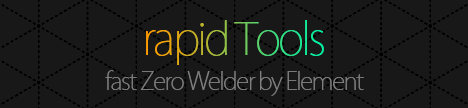
<style>
.page{position:relative;width:468px;height:108px;background:#181818}
.page>*{position:absolute;margin:0}
.t1{font:44.1px "KozGoPr6N-ExtraLight";letter-spacing:-0.06em}
.t2{font:24.1px "KozGoPr6N-ExtraLight";letter-spacing:-0.06em;color:#7f7f7f}
</style>
<div class="page">
<p class="t1" style="left:146px;top:20px;width:178px;height:45px">rapid Tools</p>
<p class="t2" style="left:105px;top:70px;width:259px;height:26px">fast Zero Welder by Element</p>
</div>
